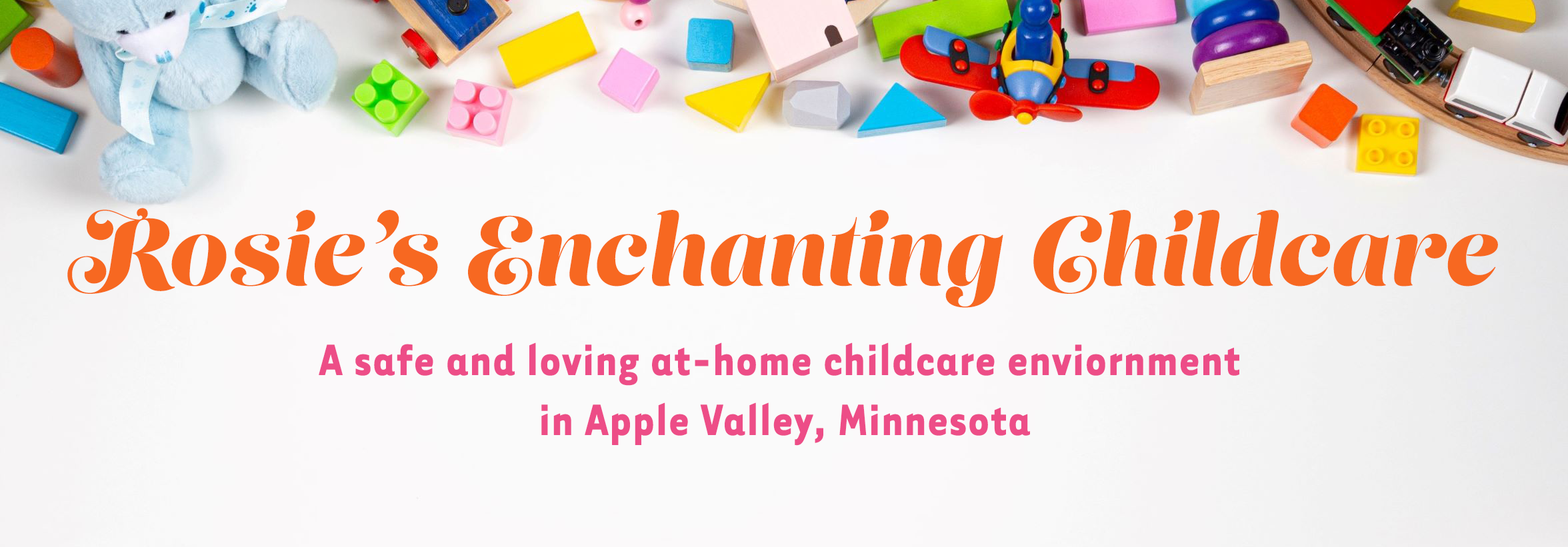
<style>
.page{position:relative;width:1568px;height:547px}
.page>*{position:absolute;margin:0}
.t1{font:50px "TarzanaNarOT-Bold";color:#ed4d87;font-weight:bold}
.t2{font:94.4px "LustScript-Fine";color:#f76821;font-weight:bold}
</style>
<div class="page">
<p class="t1" style="left:67px;top:208px;width:1431px;height:238px;text-align:center"><span class="t2">Rosie’s Enchanting Childcare<br><br></span>A safe and loving at-home childcare enviornment <br>in Apple Valley, Minnesota</p>
</div>
